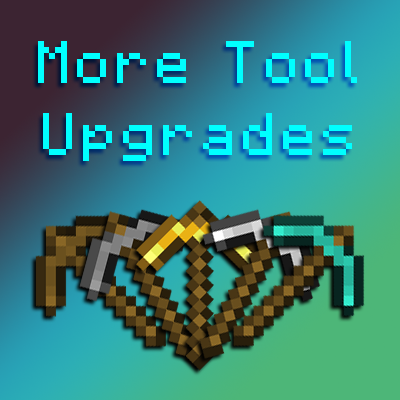
<style>
.page{position:relative;width:400px;height:400px}
.page>*{position:absolute;margin:0}
.t1{font:60px "Minecraft-Regular";letter-spacing:0.1em;color:#00ffff;scale:0.95 1}
</style>
<div class="page">
<p class="t1" style="left:38px;top:41px;width:319px;height:120px;text-align:center">More Tool<br>Upgrades</p>
</div>
